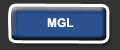
<style>
.page{position:relative;width:120px;height:50px;background:#2a5290}
.page>*{position:absolute;margin:0}
.t1{font:12px "Arial-BoldMT";color:#ffffff}
</style>
<div class="page">
<p class="t1" style="left:47px;top:18px;width:27px;height:10px">MGL</p>
</div>
